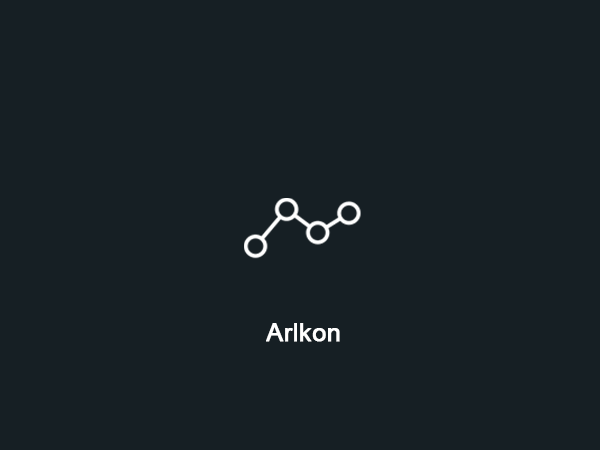
<style>
.page{position:relative;width:600px;height:450px;background:#161f24}
.page>*{position:absolute;margin:0}
.t1{font:25px "ArialMT";color:#ffffff;font-weight:bold}
</style>
<div class="page">
<p class="t1" style="left:266px;top:323px;width:74px;height:19px">Arlkon</p>
</div>
